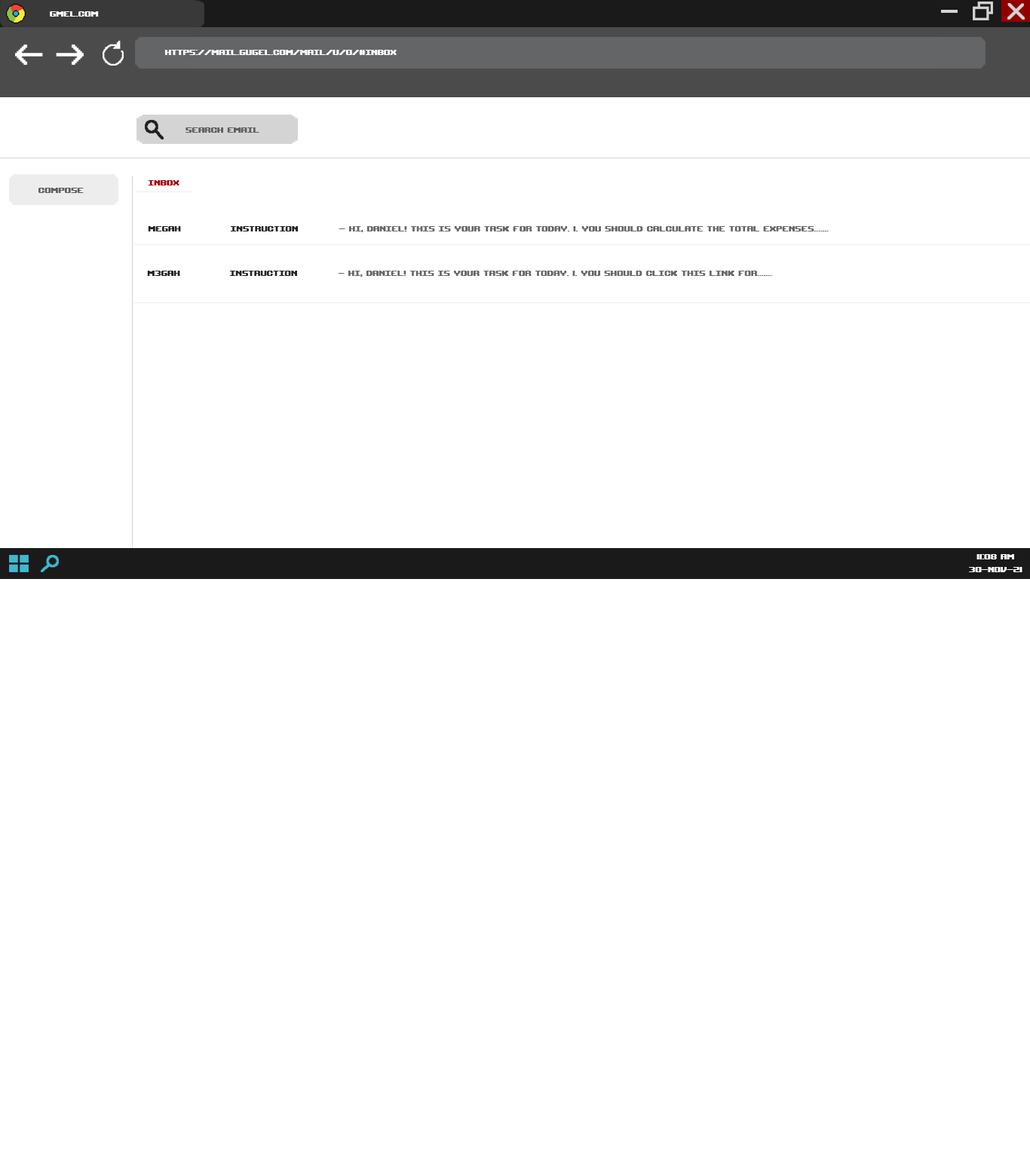
<style>
.page{position:relative;width:1030px;height:1158px;background:#ffffff}
.page>*{position:absolute;margin:0}
.t1{font:10.6px "UpheavalTT-BRK-";color:#ffffff}
.t2{font:10.6px "UpheavalTT-BRK-";color:#5e5e5e}
.t3{font:10.6px "UpheavalTT-BRK-";color:#a30000}
.t4{font:10.6px "UpheavalTT-BRK-";color:#222222}
.t5{font:10.6px "UpheavalTT-BRK-";color:#666666}
</style>
<div class="page">
<p class="t1" style="left:50px;top:11px;width:49px;height:6px">gmel.com</p>
<p class="t1" style="left:165px;top:50px;width:232px;height:5px">https://mail.gugel.com/mail/u/0/#inbox</p>
<p class="t2" style="left:185px;top:127px;width:74px;height:6px">search email</p>
<p class="t3" style="left:148px;top:180px;width:31px;height:5px">inbox</p>
<p class="t2" style="left:38px;top:188px;width:46px;height:5px">compose</p>
<p class="t4" style="left:148px;top:226px;width:33px;height:5px">megah</p>
<p class="t4" style="left:231px;top:226px;width:67px;height:5px">instruction</p>
<p class="t5" style="left:338px;top:226px;width:491px;height:6px">- Hi, Daniel! this is your task for today. 1. You should calculate the total expenses.......</p>
<p class="t4" style="left:147px;top:271px;width:33px;height:5px">m3gah</p>
<p class="t4" style="left:230px;top:271px;width:67px;height:5px">instruction</p>
<p class="t5" style="left:338px;top:271px;width:434px;height:6px">- Hi, Daniel! this is your task for today. 1. You should click this link for.......</p>
<p class="t1" style="left:969px;top:554px;width:53px;height:18px;text-align:center">11:08 am<br>30-nov-21</p>
</div>
